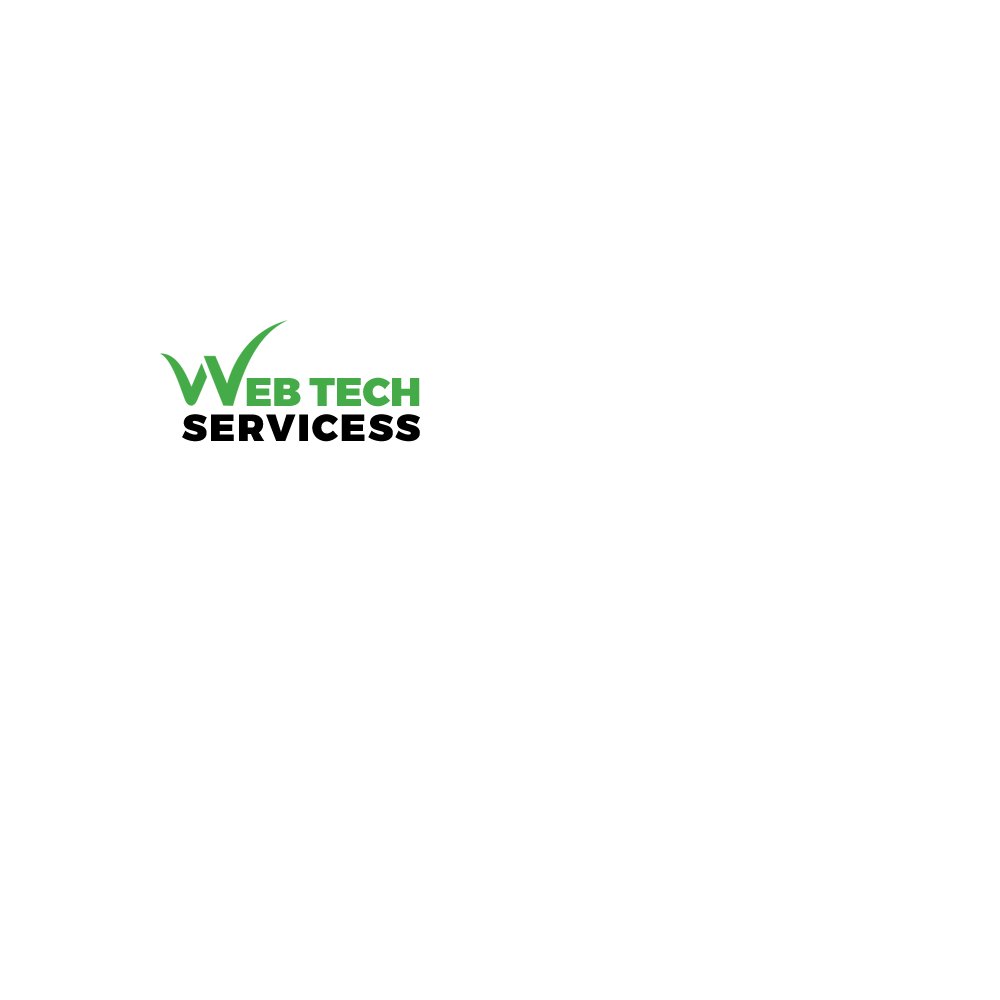
<style>
.page{position:relative;width:1000px;height:1000px;background:#ffffff}
.page>*{position:absolute;margin:0}
.t1{font:40px "Montserrat-Black";color:#45ab48;text-transform:uppercase}
.t2{font:38px "Montserrat-Black";letter-spacing:0.05em;color:#000000;text-transform:uppercase}
</style>
<div class="page">
<p class="t1" style="left:246px;top:377px;width:174px;height:30px">eb tech</p>
<p class="t2" style="left:182px;top:414px;width:238px;height:28px">servicess</p>
</div>
